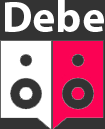
<style>
.page{position:relative;width:105px;height:129px;background:#333333}
.page>*{position:absolute;margin:0}
.t1{font:43.9px "MyriadPro-Bold";color:#ffffff}
</style>
<div class="page">
<p class="t1" style="left:5px;top:0px;width:99px;height:32px">Debe</p>
</div>
